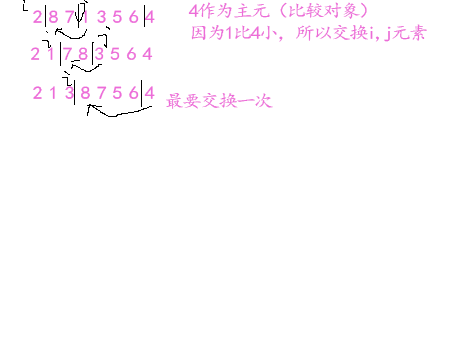
<style>
.page{position:relative;width:454px;height:340px;background:#ffffff}
.page>*{position:absolute;margin:0}
.t1{font:17.8px/18px "¿¬Ìå";letter-spacing:-0.1em;color:#ec6cd8;scale:1.12 1}
.t2{font:17.8px "¿¬Ìå";letter-spacing:-0.1em;color:#ec6cd8;scale:1.12 1}
</style>
<div class="page">
<p class="t1" style="left:188px;top:2px;width:239px;height:40px">4作为主元（比较对象）<br>因为1比4小，所以交换i,j元素</p>
<p class="t2" style="left:30px;top:47px;width:123px;height:13px">2 1 7 8 3 5 6 4</p>
<p class="t2" style="left:166px;top:93px;width:107px;height:16px">最要交换一次</p>
</div>
